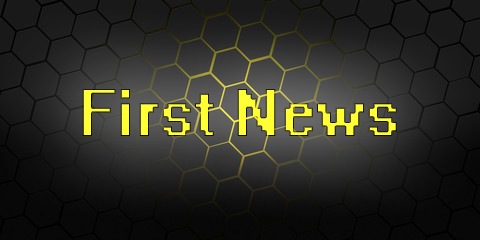
<style>
.page{position:relative;width:480px;height:240px}
.page>*{position:absolute;margin:0}
.t1{font:60px "System";color:#ffff33}
</style>
<div class="page">
<p class="t1" style="left:82px;top:89px;width:315px;height:47px">First News</p>
</div>
